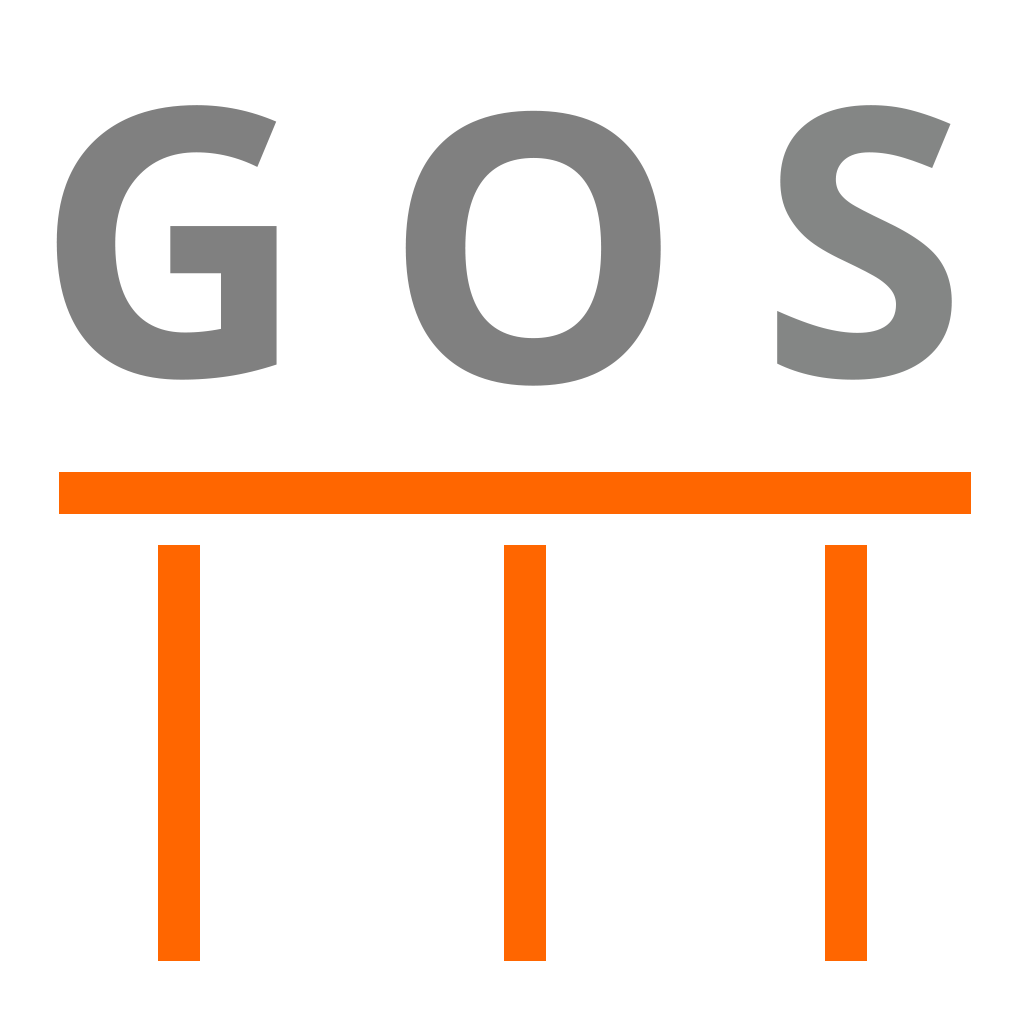
<style>
.page{position:relative;width:1024px;height:1024px;background:#ffffff}
.page>*{position:absolute;margin:0}
.t1{font:374.4px "OpenSans-Bold";color:#808080}
.t2{font:374.4px "OpenSans-Bold";color:#848685}
</style>
<div class="page">
<p class="t1" style="left:56px;top:105px;width:221px;height:275px">G</p>
<p class="t1" style="left:405px;top:110px;width:256px;height:276px">O</p>
<p class="t2" style="left:777px;top:105px;width:175px;height:275px">S</p>
</div>
